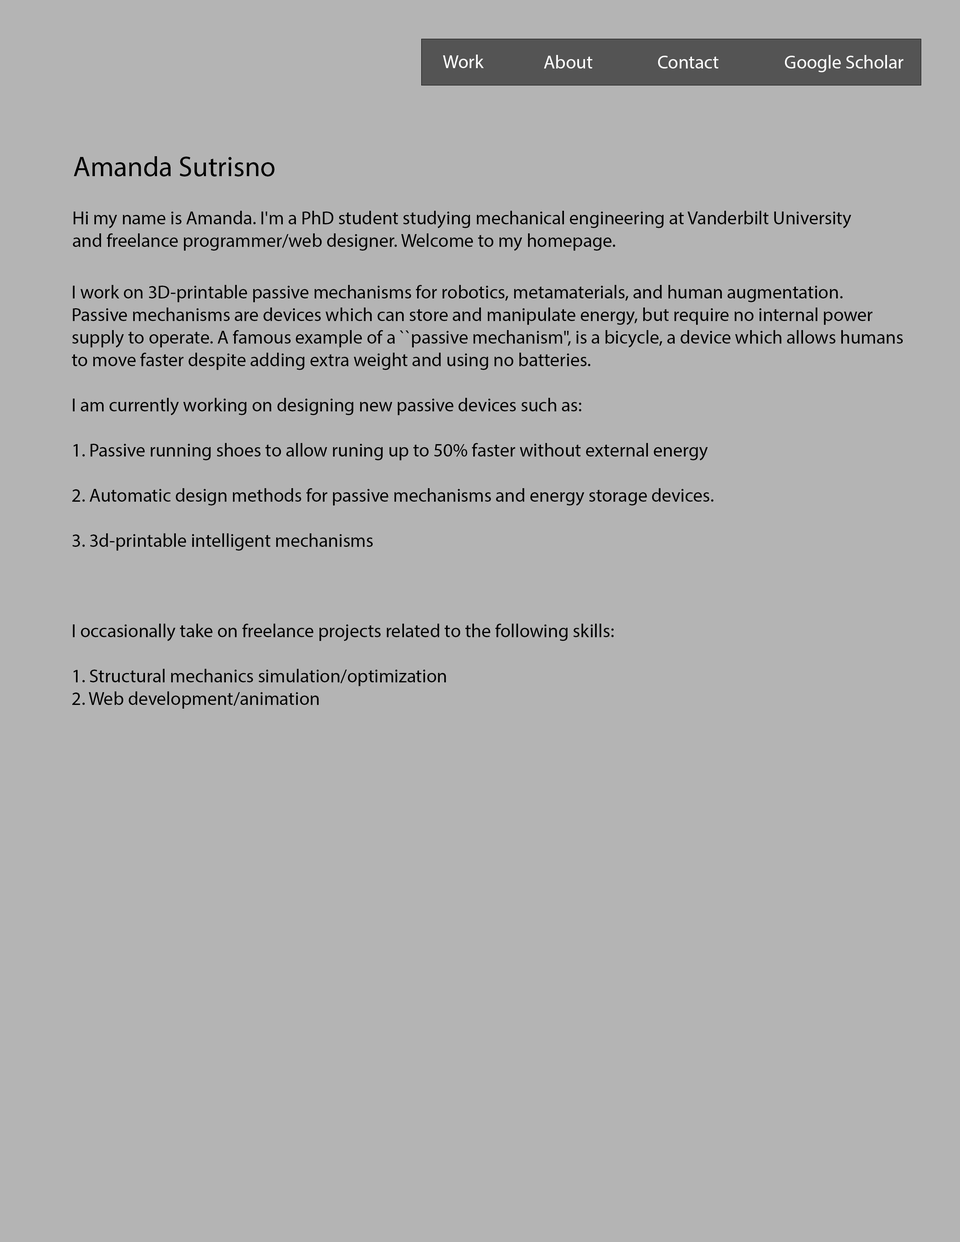
<style>
.page{position:relative;width:960px;height:1242px;background:#b4b4b4}
.page>*{position:absolute;margin:0}
.t1{font:18.8px "MyriadPro-Regular";color:#ffffff}
.t2{font:28.2px "MyriadPro-Regular";color:#000000}
.t3{font:18.8px "MyriadPro-Regular";color:#000000}
</style>
<div class="page">
<p class="t1" style="left:443px;top:55px;width:41px;height:13px">Work</p>
<p class="t1" style="left:544px;top:55px;width:49px;height:14px">About</p>
<p class="t1" style="left:658px;top:56px;width:61px;height:13px">Contact</p>
<p class="t1" style="left:785px;top:55px;width:118px;height:17px">Google Scholar</p>
<p class="t2" style="left:74px;top:156px;width:200px;height:21px">Amanda Sutrisno</p>
<p class="t3" style="left:73px;top:211px;width:778px;height:40px">Hi my name is Amanda. I'm a PhD student studying mechanical engineering at Vanderbilt University<br>and freelance programmer/web designer. Welcome to my homepage.</p>
<p class="t3" style="left:72px;top:285px;width:831px;height:424px">I work on 3D-printable passive mechanisms for robotics, metamaterials, and human augmentation. <br>Passive mechanisms are devices which can store and manipulate energy, but require no internal power <br>supply to operate. A famous example of a ``passive mechanism", is a bicycle, a device which allows humans <br>to move faster despite adding extra weight and using no batteries. <br><br>I am currently working on designing new passive devices such as:<br><br>1. Passive running shoes to allow runing up to 50% faster without external energy<br><br>2. Automatic design methods for passive mechanisms and energy storage devices.<br><br>3. 3d-printable intelligent mechanisms<br><br><br><br>I occasionally take on freelance projects related to the following skills:<br><br>1. Structural mechanics simulation/optimization<br>2. Web development/animation</p>
</div>
